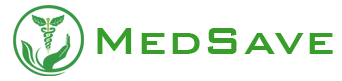
<style>
.page{position:relative;width:342px;height:81px;background:#ffffff}
.page>*{position:absolute;margin:0}
.t1{font:50px "BankGothicBT-Medium";color:#389e2a}
</style>
<div class="page">
<p class="t1" style="left:97px;top:28px;width:236px;height:26px">MedSave</p>
</div>
